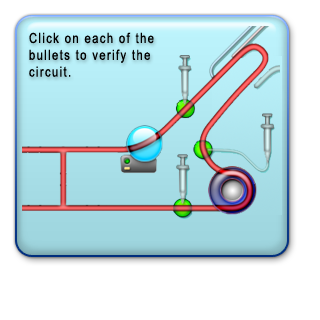
<style>
.page{position:relative;width:320px;height:320px;background:#ffffff}
.page>*{position:absolute;margin:0}
.t1{font:14px "ArialMT";letter-spacing:0.1em;color:#000000;scale:0.8 1}
</style>
<div class="page">
<p class="t1" style="left:29px;top:32px;width:125px;height:45px">Click on each of the <br>bullets to verify the <br>circuit.</p>
</div>
